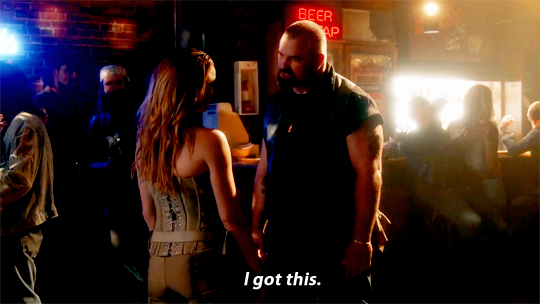
<style>
.page{position:relative;width:540px;height:304px;background:#000000}
.page>*{position:absolute;margin:0}
.t1{font:18px "MyriadPro-Semibold";color:#ffffff;font-weight:bold;font-style:italic}
</style>
<div class="page">
<p class="t1" style="left:244px;top:272px;width:77px;height:18px">I got this.</p>
</div>
